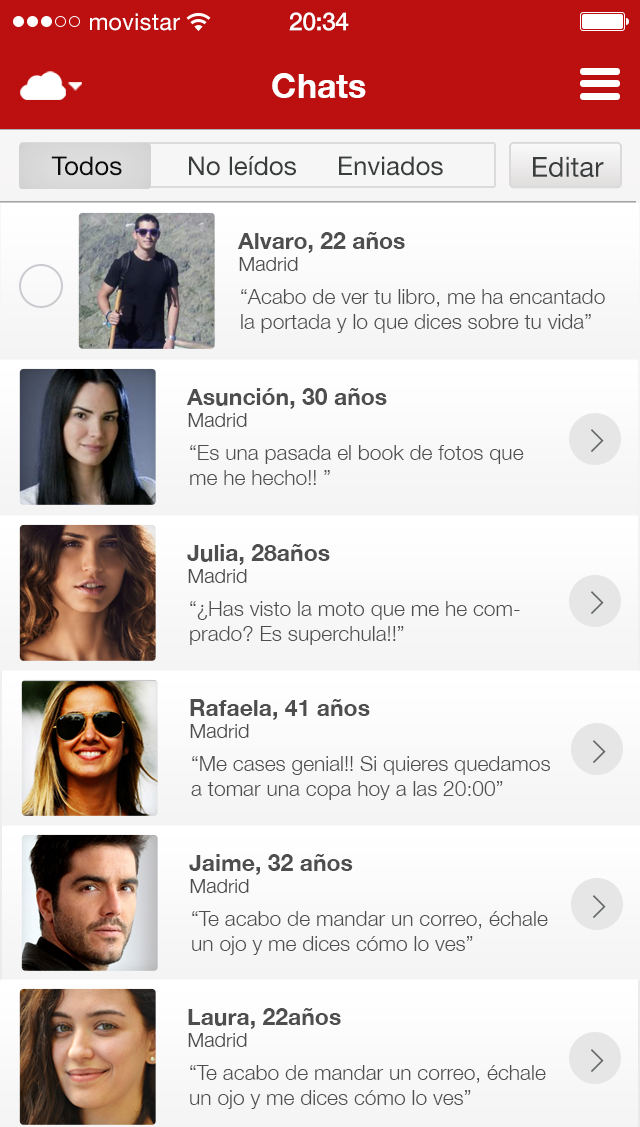
<style>
.page{position:relative;width:640px;height:1127px}
.page>*{position:absolute;margin:0}
.t1{font:23px "HelveticaNeue";letter-spacing:0.02em;color:#ffffff}
.t2{font:25px "HelveticaNeue-Medium";letter-spacing:-0.02em;color:#ffffff}
.t3{font:34px "HelveticaNeue-Bold";color:#ffffff}
.t4{font:26px "HelveticaNeue";color:#0b0b0b}
.t5{font:26px "HelveticaNeue";color:#3a3d3e}
.t6{font:27.8px "HelveticaNeue";color:#3a3d3e}
.t7{font:23px "HelveticaNeue-Bold";color:#4e4e4e}
.t8{font:20px "HelveticaNeue-Light";color:#4e4e4e}
.t9{font:21px "HelveticaNeue-Light";color:#4e4e4e}
</style>
<div class="page">
<p class="t1" style="left:90px;top:13px;width:90px;height:18px">movistar</p>
<p class="t2" style="left:289px;top:12px;width:60px;height:19px">20:34</p>
<p class="t3" style="left:272px;top:73px;width:94px;height:25px">Chats</p>
<p class="t4" style="left:51px;top:156px;width:71px;height:20px">Todos</p>
<p class="t5" style="left:189px;top:156px;width:107px;height:20px">No leídos</p>
<p class="t5" style="left:339px;top:156px;width:104px;height:20px">Enviados</p>
<p class="t6" style="left:533px;top:156px;width:71px;height:21px">Editar</p>
<p class="t7" style="left:237px;top:232px;width:168px;height:21px">Alvaro, 22 años</p>
<p class="t8" style="left:239px;top:257px;width:59px;height:14px">Madrid</p>
<p class="t9" style="left:241px;top:289px;width:364px;height:44px">“Acabo de ver tu libro, me ha encantado la portada y lo que dices sobre tu vida”</p>
<p class="t7" style="left:186px;top:388px;width:201px;height:21px">Asunción, 30 años</p>
<p class="t8" style="left:188px;top:413px;width:59px;height:14px">Madrid</p>
<p class="t9" style="left:190px;top:445px;width:334px;height:40px">“Es una pasada el book de fotos que me he hecho!! ”</p>
<p class="t7" style="left:187px;top:544px;width:143px;height:21px">Julia, 28años</p>
<p class="t8" style="left:188px;top:569px;width:59px;height:14px">Madrid</p>
<p class="t9" style="left:190px;top:601px;width:330px;height:44px">“¿Has visto la moto que me he comprado? Es superchula!!”</p>
<p class="t7" style="left:190px;top:699px;width:180px;height:21px">Rafaela, 41 años</p>
<p class="t8" style="left:190px;top:724px;width:59px;height:14px">Madrid</p>
<p class="t9" style="left:191px;top:756px;width:359px;height:44px">“Me cases genial!! Si quieres quedamos a tomar una copa hoy a las 20:00”</p>
<p class="t7" style="left:189px;top:854px;width:164px;height:21px">Jaime, 32 años</p>
<p class="t8" style="left:190px;top:879px;width:59px;height:14px">Madrid</p>
<p class="t9" style="left:192px;top:911px;width:356px;height:44px">“Te acabo de mandar un correo, échale un ojo y me dices cómo lo ves”</p>
<p class="t7" style="left:188px;top:1008px;width:153px;height:21px">Laura, 22años</p>
<p class="t8" style="left:188px;top:1033px;width:59px;height:14px">Madrid</p>
<p class="t9" style="left:190px;top:1065px;width:356px;height:44px">“Te acabo de mandar un correo, échale un ojo y me dices cómo lo ves”</p>
</div>
